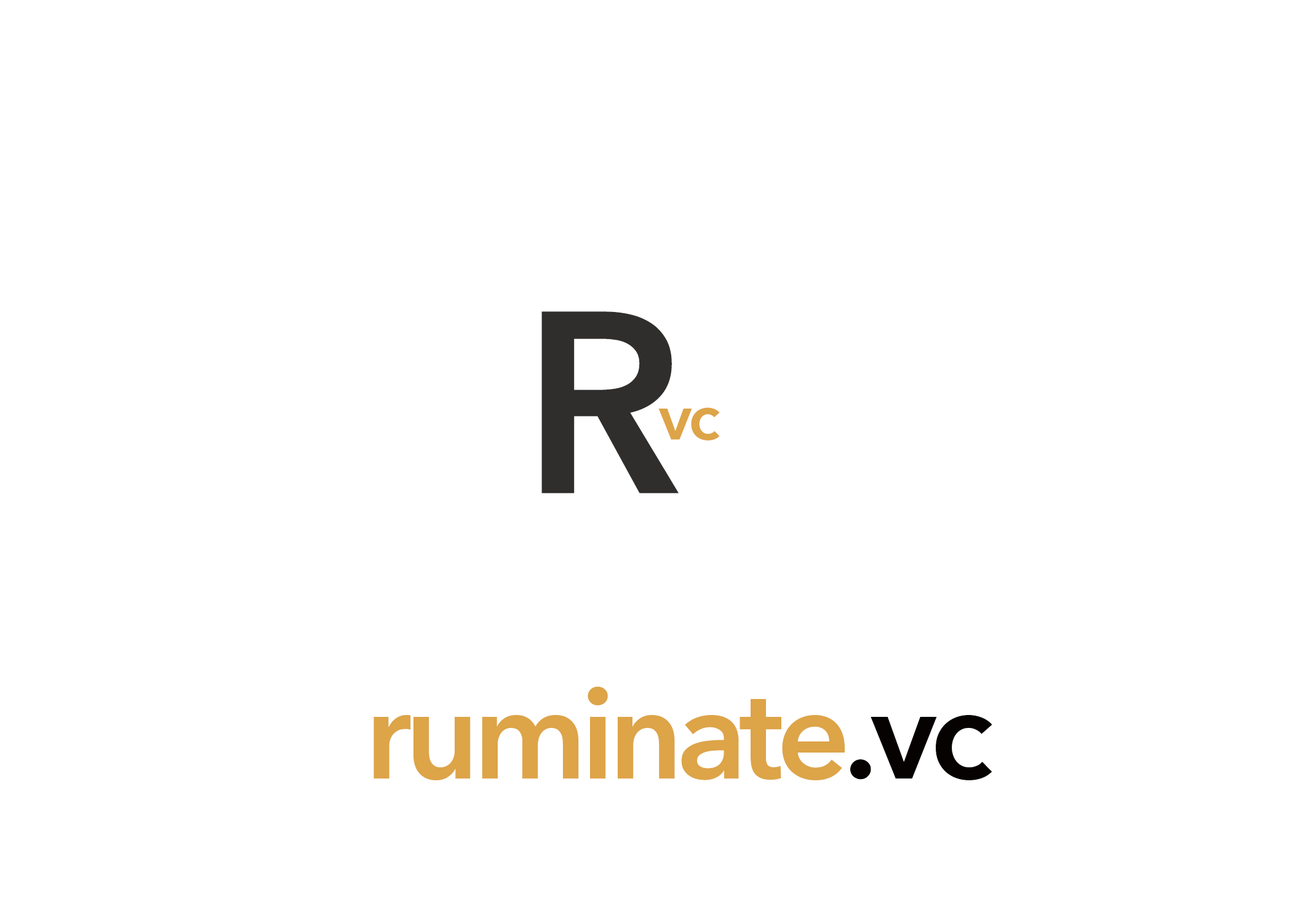
<style>
.page{position:relative;width:1292px;height:923px;background:#ffffff}
.page>*{position:absolute;margin:0}
.t1{font:256.4px "AvenirNext-DemiBold";letter-spacing:-0.05em;color:#302e2c}
.t2{font:64.1px "AvenirNext-DemiBold";letter-spacing:-0.05em;color:#dda448}
.t3{font:128.2px "AvenirNext-DemiBold";letter-spacing:-0.05em;color:#dda448}
.t4{font:128.2px "AvenirNext-DemiBold";letter-spacing:-0.05em;color:#060202}
</style>
<div class="page">
<p class="t1" style="left:541px;top:311px;width:138px;height:182px">R</p>
<p class="t2" style="left:658px;top:407px;width:62px;height:34px">vc</p>
<p class="t3" style="left:373px;top:687px;width:619px;height:93px">ruminate<span class="t4">.vc</span></p>
</div>
